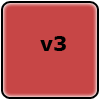
<style>
.page{position:relative;width:100px;height:100px;background:#c74646}
.page>*{position:absolute;margin:0}
.t1{font:20px "Verdana-Bold";color:#000000}
</style>
<div class="page">
<p class="t1" style="left:40px;top:36px;width:26px;height:15px">v3</p>
</div>
